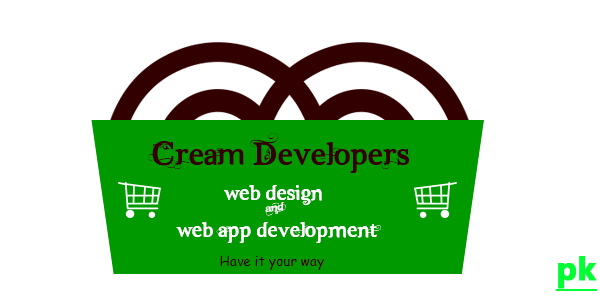
<style>
.page{position:relative;width:600px;height:300px;background:#ffffff}
.page>*{position:absolute;margin:0}
.t1{font:33.3px "Dutch&Harley";color:#330000}
.t2{font:22.2px/18.9px "Dutch&Harley";color:#ffffff}
.t3{font:33.3px/18.9px "Dutch&Harley";color:#ffffff}
.t4{font:13.3px "ComicSansMS";color:#330000}
.t5{font:33.3px "Ebrima-Bold";color:#00ff33;font-weight:bold;text-decoration:underline}
</style>
<div class="page">
<p class="t1" style="left:148px;top:133px;width:261px;height:40px">Cream Developers</p>
<p class="t2" style="left:176px;top:185px;width:205px;height:58px;text-align:center">Web design,<br><span class="t3">&amp;<br></span>Web app development</p>
<p class="t4" style="left:220px;top:256px;width:104px;height:14px">Have it your way</p>
<p class="t5" style="left:555px;top:256px;width:42px;height:35px">pk</p>
</div>
